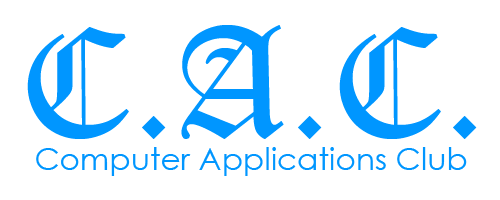
<style>
.page{position:relative;width:500px;height:200px;background:#ffffff}
.page>*{position:absolute;margin:0}
.t1{font:154.2px "OldEnglishTextMT";color:#0096ff}
.t2{font:31.2px "CenturyGothic";color:#0096ff}
</style>
<div class="page">
<p class="t1" style="left:27px;top:25px;width:450px;height:114px">C.A.C.</p>
<p class="t2" style="left:36px;top:147px;width:431px;height:29px">Computer Applications Club</p>
</div>
